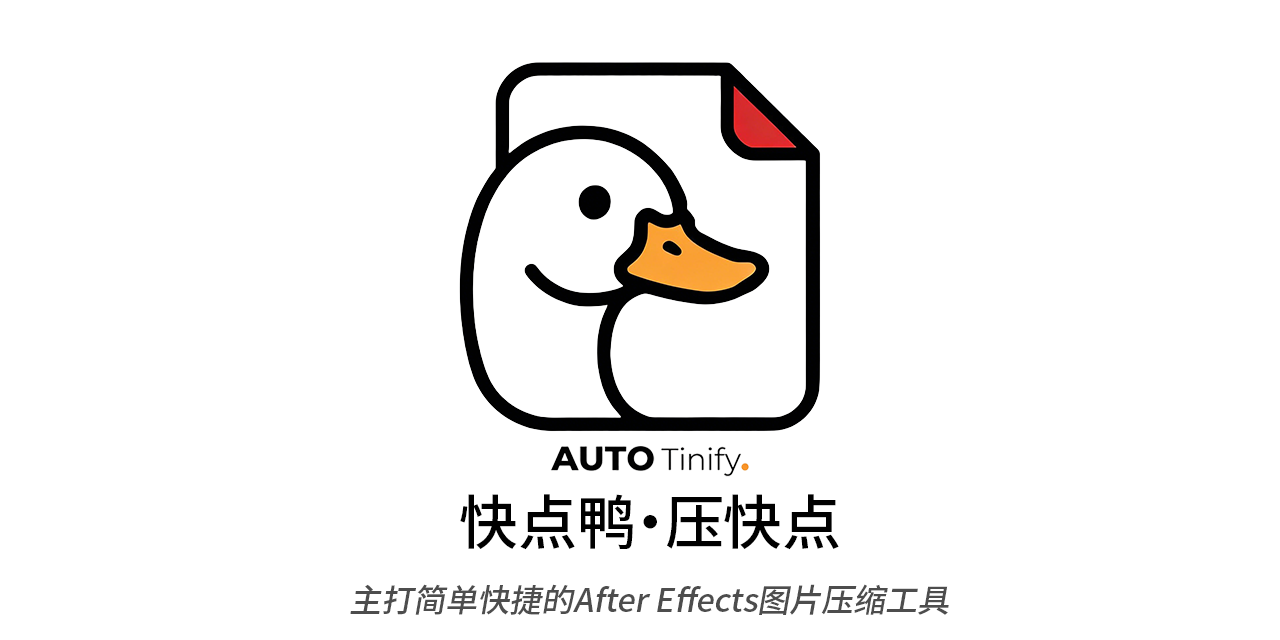
<style>
.page{position:relative;width:1280px;height:640px;background:#ffffff}
.page>*{position:absolute;margin:0}
.t1{font:58.7px "SourceHanSansSC-Medium";color:#000000}
.t2{font:32px "SourceHanSansSC-Medium";color:#4d4d4d;font-style:italic}
</style>
<div class="page">
<p class="t1" style="left:460px;top:494px;width:379px;height:56px">快点鸭·压快点</p>
<p class="t2" style="left:350px;top:584px;width:599px;height:31px">主打简单快捷的After Effects图片压缩工具</p>
</div>
